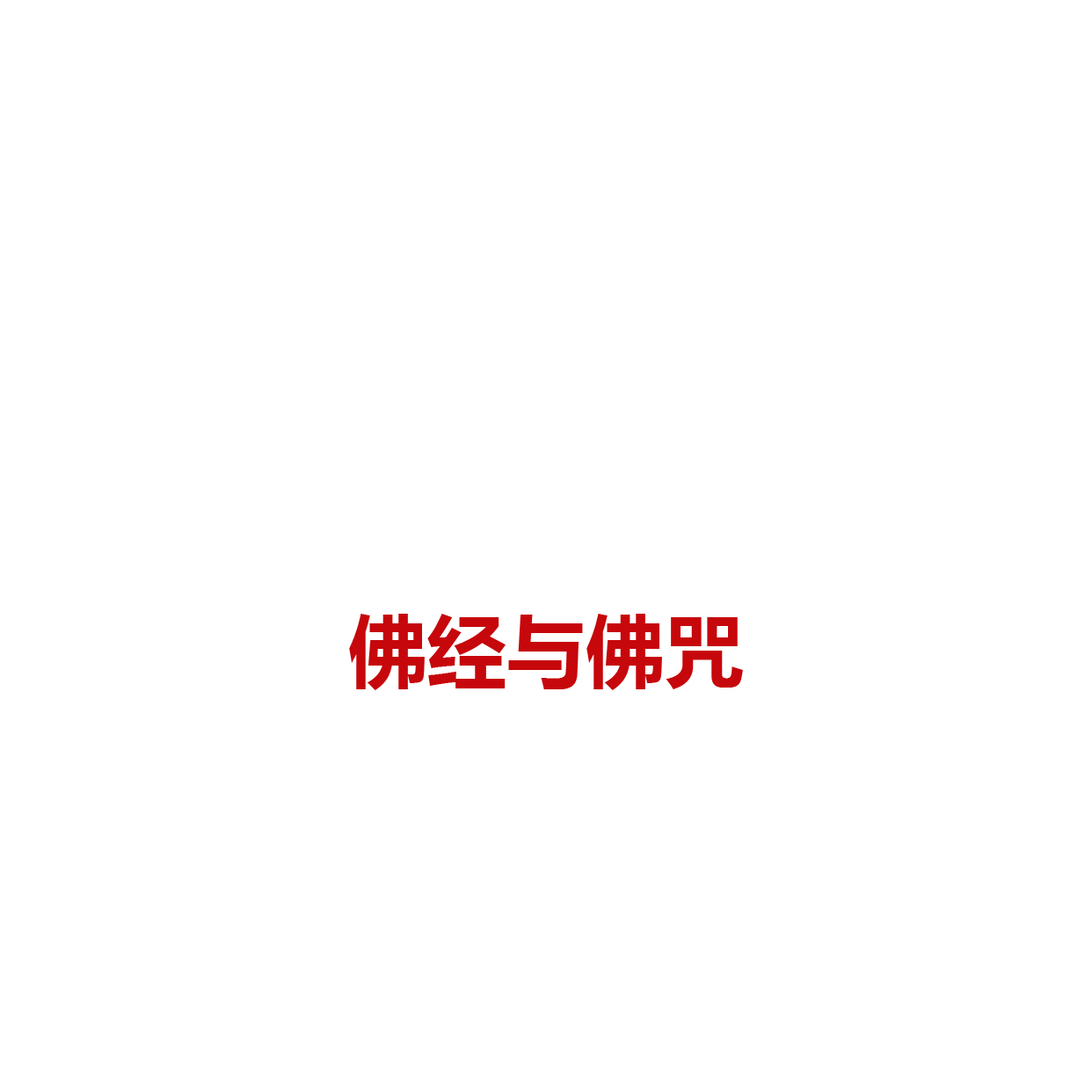
<style>
.page{position:relative;width:1092px;height:1092px;background:#ffffff}
.page>*{position:absolute;margin:0}
.t1{font:79.1px "MicrosoftYaHeiUI-Bold";color:#c6070b}
</style>
<div class="page">
<p class="t1" style="left:349px;top:614px;width:394px;height:76px">佛经与佛咒</p>
</div>
